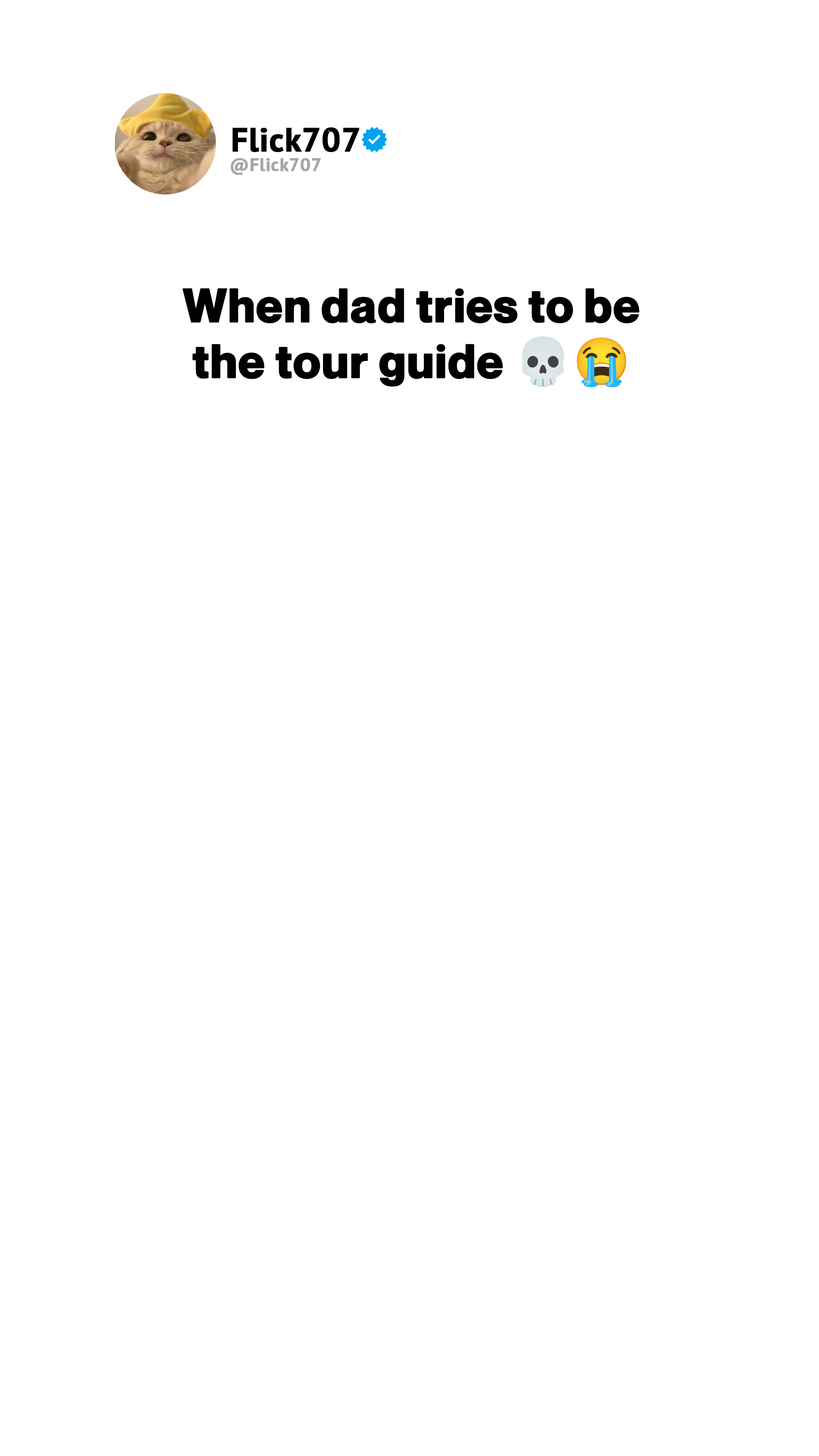
<style>
.page{position:relative;width:819px;height:1456px;background:#ffffff}
.page>*{position:absolute;margin:0}
.t1{font:46.3px "NeueMontreal-Bold";letter-spacing:0.01em;color:#000000;font-weight:bold}
.t2{font:46.3px "NotoColorEmoji-SVG";letter-spacing:0.01em;color:#000000;font-weight:bold}
</style>
<div class="page">
<p class="t1" style="left:182px;top:288px;width:458px;height:100px;text-align:center">When dad tries to be<br>the tour guide <span class="t2">💀😭</span></p>
</div>
